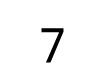
<style>
.page{position:relative;width:105px;height:83px;background:#ffffff}
.page>*{position:absolute;margin:0}
.t1{font:47.9px "DroidSans";color:#000000}
</style>
<div class="page">
<p class="t1" style="left:41px;top:28px;width:23px;height:35px">7</p>
</div>
